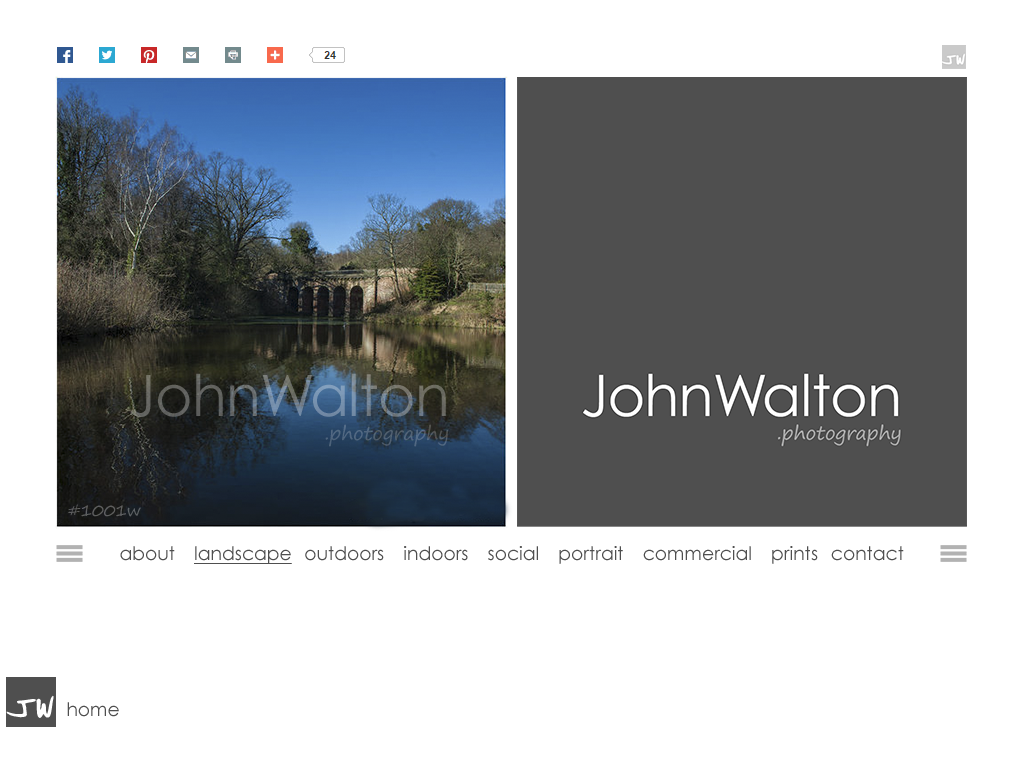
<style>
.page{position:relative;width:1024px;height:768px;background:#ffffff}
.page>*{position:absolute;margin:0}
.t1{font:57.2px "CenturyGothic";letter-spacing:-0.01em}
.t2{font:57.2px "CenturyGothic";letter-spacing:-0.1em}
.t3{font:19.1px "SegoePrint";letter-spacing:-0.01em;color:#52657c}
.t4{font:16px "SegoePrint";letter-spacing:-0.01em;color:#5e5e5f}
.t5{font:18.7px "CenturyGothic";color:#4f4f4f}
.t6{font:18.7px "CenturyGothic";color:#4f4f4f;text-decoration:underline}
</style>
<div class="page">
<p class="t1" style="left:130px;top:373px;width:316px;height:44px">John<span class="t2">W</span>alton</p>
<p class="t3" style="left:325px;top:424px;width:123px;height:23px">.photography</p>
<p class="t4" style="left:68px;top:504px;width:73px;height:13px">#1001w</p>
<p class="t5" style="left:120px;top:546px;width:784px;height:18px">about   <span class="t6">landscape</span>  outdoors   indoors   social   portrait   commercial   prints  contact</p>
<p class="t5" style="left:67px;top:702px;width:52px;height:15px">home</p>
</div>
